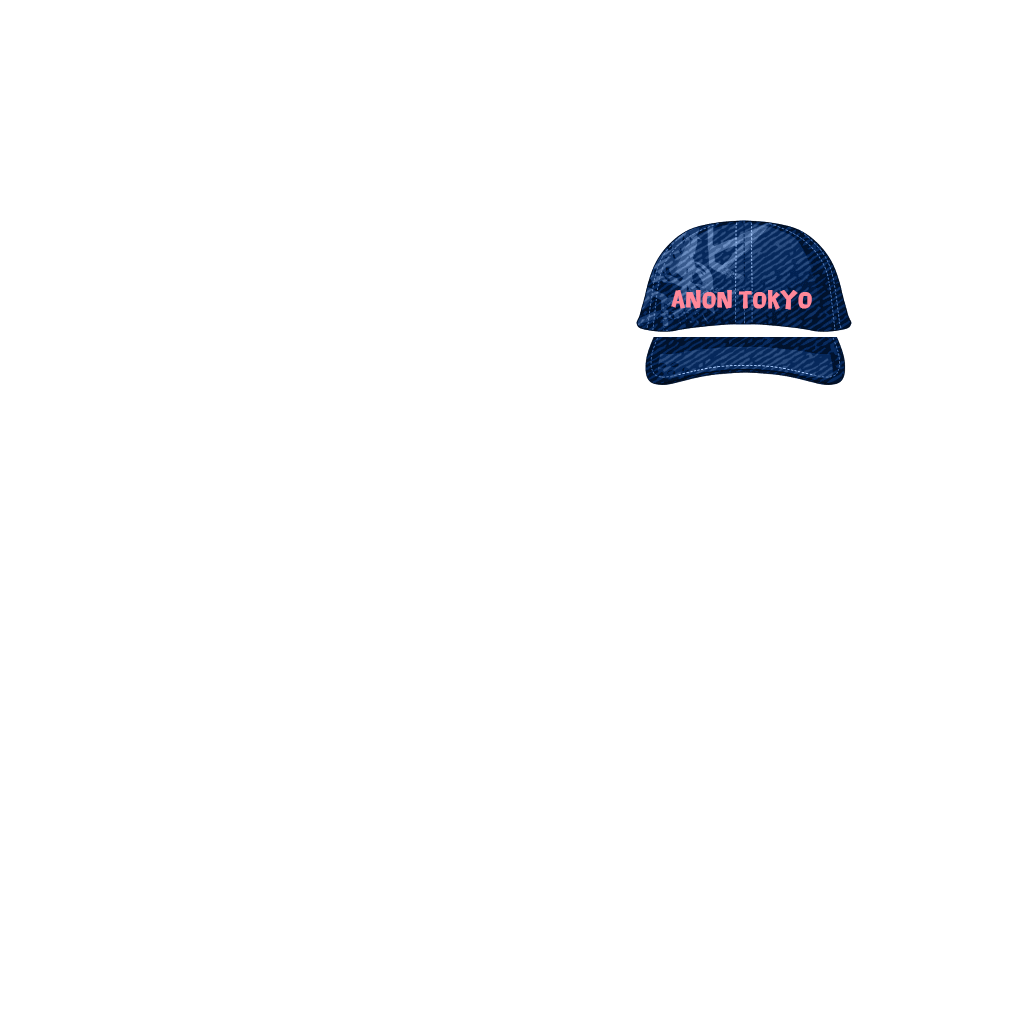
<style>
.page{position:relative;width:1024px;height:1024px;background:#ffffff}
.page>*{position:absolute;margin:0}
.t1{font:20.8px "MFTongXin_Noncommercial-Regular";color:#ff8899;font-weight:bold}
</style>
<div class="page">
<p class="t1" style="left:671px;top:290px;width:141px;height:20px">ANON TOKYO</p>
</div>
